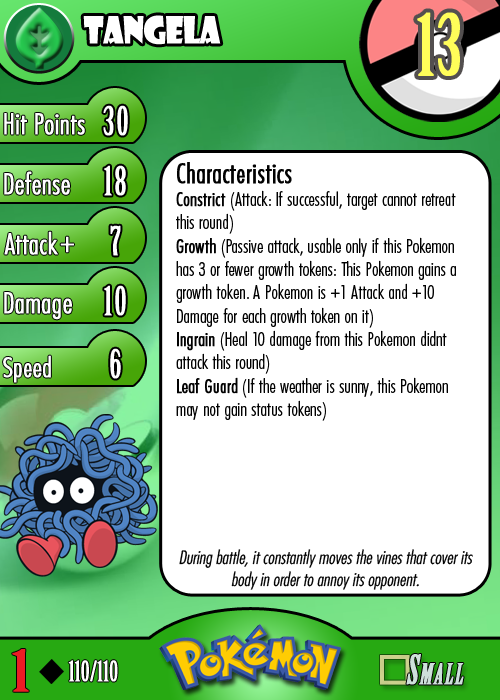
<style>
.page{position:relative;width:500px;height:700px;background:#ffffff}
.page>*{position:absolute;margin:0}
.t1{font:36.7px "ShowcardGothic-Reg";letter-spacing:-0.025em;color:#ffffff;scale:0.91 1}
.t2{font:83.3px "BirchStd";letter-spacing:0.025em;color:#fffd59;font-weight:bold}
.t3{font:27.8px "Futura-CondensedLight";color:#ffffff;font-weight:bold}
.t4{font:38.9px "BirchStd";letter-spacing:0.035em;color:#ffffff;font-weight:bold}
.t5{font:19.4px "FuturaCondensedBQ-Light";color:#010101}
.t6{font:27.8px "FuturaCondensedBQ-Light";color:#010101;font-weight:bold}
.t7{font:19.4px "FuturaCondensedBQ-Light";color:#010101;font-weight:bold}
.t8{font:30.6px "Futura-CondensedLight";color:#ffffff;font-weight:bold}
.t9{font:27.8px "FuturaCondensedBQ-Light";color:#ffffff;font-weight:bold}
.t10{font:18.1px "Futura-CondensedLight";color:#010101;font-style:italic}
.t11{font:55.6px "BirchStd";color:#ed1c24;font-weight:bold;scale:1.5 1}
.t12{font:27.8px "BirchStd";color:#ffffff;font-weight:bold}
</style>
<div class="page">
<p class="t1" style="left:83px;top:15px;width:138px;height:30px">tangela</p>
<p class="t2" style="left:417px;top:12px;width:43px;height:64px">13</p>
<p class="t3" style="left:4px;top:113px;width:81px;height:22px">Hit Points</p>
<p class="t4" style="left:103px;top:105px;width:25px;height:31px">30</p>
<p class="t3" style="left:4px;top:171px;width:66px;height:24px">Defense</p>
<p class="t4" style="left:104px;top:165px;width:22px;height:31px">18</p>
<p class="t5" style="left:176px;top:162px;width:280px;height:259px"><span class="t6">Characteristics<br></span><span class="t7">Constrict </span>(Attack: If successful, target cannot retreat this round)<br><span class="t7">Growth</span> (Passive attack, usable only if this Pokemon has 3 or fewer growth tokens: This Pokemon gains a growth token. A Pokemon is +1 Attack and +10 Damage for each growth token on it)<br><span class="t7">Ingrain</span> (Heal 10 damage from this Pokemon didnt attack this round)<br><span class="t7">Leaf Guard</span> (If the weather is sunny, this Pokemon may not gain status tokens)</p>
<p class="t3" style="left:4px;top:231px;width:54px;height:24px">Attack</p>
<p class="t4" style="left:110px;top:225px;width:11px;height:31px">7</p>
<p class="t8" style="left:60px;top:236px;width:14px;height:17px">+</p>
<p class="t3" style="left:4px;top:292px;width:68px;height:28px">Damage</p>
<p class="t4" style="left:104px;top:285px;width:22px;height:31px">10</p>
<p class="t4" style="left:110px;top:348px;width:11px;height:31px">6</p>
<p class="t9" style="left:3px;top:355px;width:48px;height:28px">Speed</p>
<p class="t10" style="left:179px;top:549px;width:294px;height:41px;text-align:center">During battle, it constantly moves the vines that cover its body in order to annoy its opponent.</p>
<p class="t11" style="left:12px;top:649px;width:17px;height:43px">1</p>
<p class="t12" style="left:68px;top:660px;width:50px;height:22px">110/110</p>
</div>
